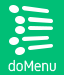
<style>
.page{position:relative;width:64px;height:75px;background:#00bf76}
.page>*{position:absolute;margin:0}
.t1{font:15px "Gidole-Regular";color:#ffffff}
</style>
<div class="page">
<p class="t1" style="left:8px;top:59px;width:48px;height:13px">doMenu</p>
</div>
